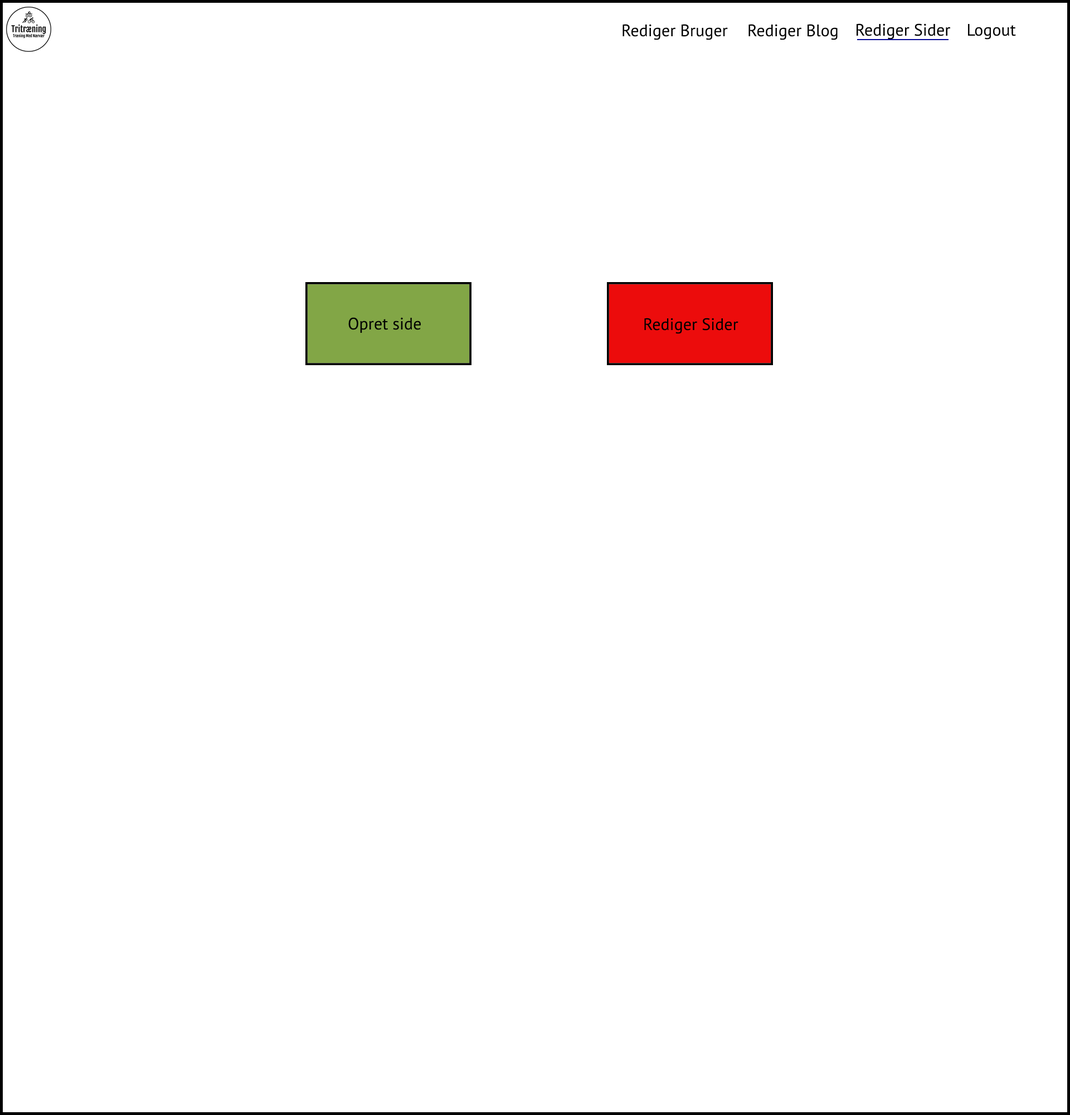
<style>
.page{position:relative;width:1070px;height:1115px;background:#ffffff}
.page>*{position:absolute;margin:0}
.t1{font:16.7px "MyriadPro-Regular";color:#000000}
</style>
<div class="page">
<p class="t1" style="left:622px;top:24px;width:106px;height:16px">Rediger Bruger</p>
<p class="t1" style="left:748px;top:24px;width:90px;height:16px">Rediger Blog</p>
<p class="t1" style="left:856px;top:23px;width:95px;height:17px">Rediger Sider</p>
<p class="t1" style="left:968px;top:24px;width:48px;height:16px">Logout</p>
<p class="t1" style="left:348px;top:317px;width:73px;height:16px">Opret side</p>
<p class="t1" style="left:644px;top:318px;width:94px;height:16px">Rediger Sider</p>
</div>
